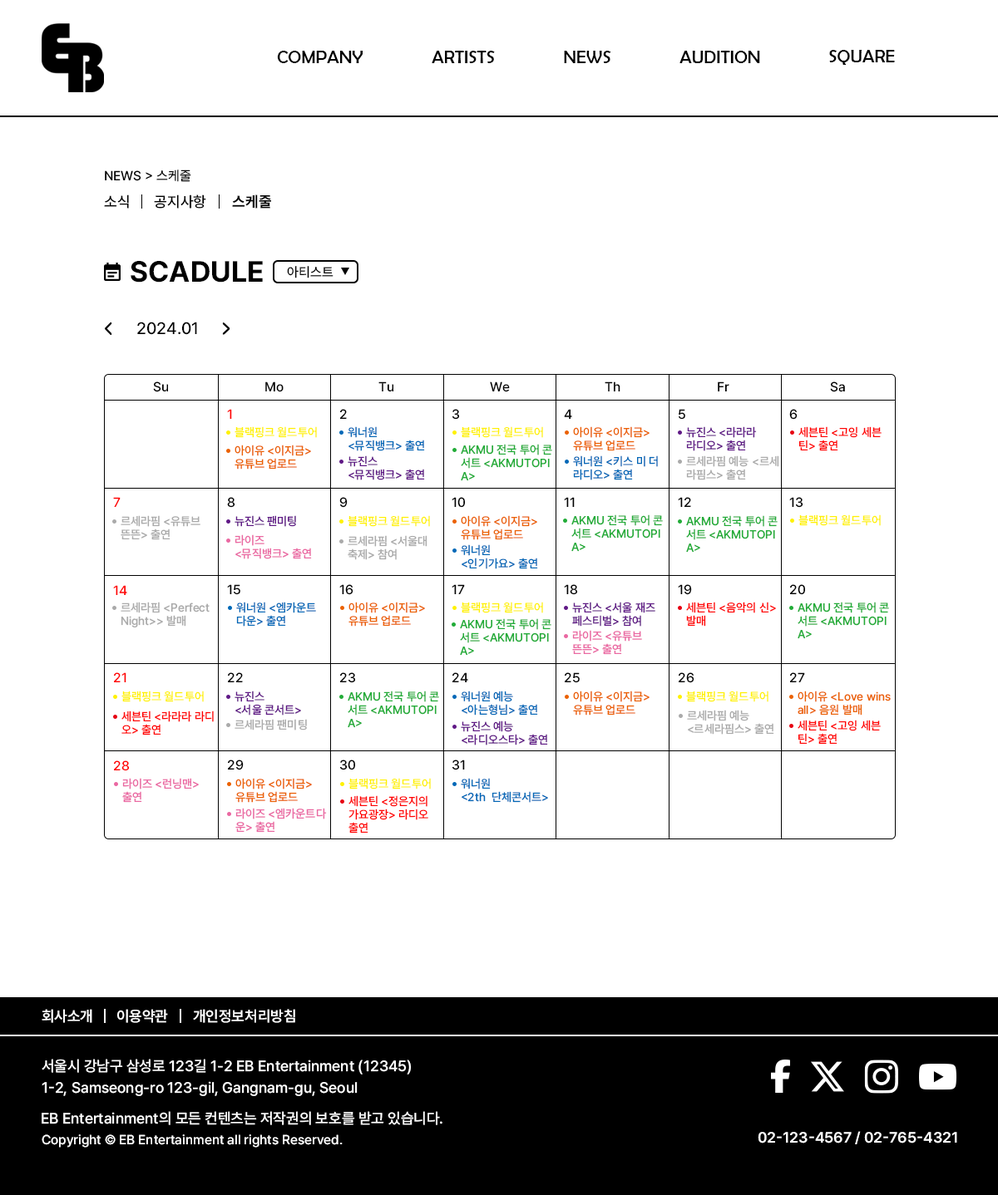
<style>
.page{position:relative;width:998px;height:1195px;background:#ffffff}
.page>*{position:absolute;margin:0}
.t1{font:18.3px "BerlinSansFB-Reg";color:#000000}
.t2{font:13.3px "Pretendard-Medium";color:#000000}
.t3{font:15px "Pretendard-Medium";color:#000000}
.t4{font:15px "Pretendard-Bold";color:#000000}
.t5{font:29.1px "Pretendard-Bold";color:#000000}
.t6{font:16.6px "Pretendard-Medium";color:#000000}
.t7{font:13.3px "Pretendard-Medium";color:#ff0000}
.t8{font:11.6px "Pretendard-Medium";color:#fff100}
.t9{font:11.6px/13.3px "Pretendard-Medium";color:#0068b7}
.t10{font:11.6px/13.3px "Pretendard-Medium";color:#eb6100}
.t11{font:11.6px/13.3px "Pretendard-Medium";color:#601986}
.t12{font:11.6px/13.3px "Pretendard-Medium";color:#ff0000}
.t13{font:11.6px/13.3px "Pretendard-Medium";color:#22ac38}
.t14{font:11.6px/13.3px "Pretendard-Medium";color:#aaaaaa}
.t15{font:11.6px "Pretendard-Medium";color:#601986}
.t16{font:11.6px/13.3px "Pretendard-Medium";color:#ea68a2}
.t17{font:11.6px "Pretendard-Medium";color:#aaaaaa}
.t18{font:15px "Pretendard-SemiBold";color:#ffffff}
.t19{font:15px/21.6px "Pretendard-Medium";color:#ffffff}
.t20{font:15px "Pretendard-Medium";color:#ffffff}
.t21{font:13.3px "Pretendard-Medium";color:#ffffff}
</style>
<div class="page">
<p class="t1" style="left:277px;top:51px;width:85px;height:12px">COMPANY</p>
<p class="t1" style="left:431px;top:51px;width:64px;height:12px">ARTISTS</p>
<p class="t1" style="left:564px;top:51px;width:47px;height:12px">NEWS</p>
<p class="t1" style="left:679px;top:51px;width:81px;height:12px">AUDITION</p>
<p class="t1" style="left:829px;top:50px;width:65px;height:15px">SQUARE</p>
<p class="t2" style="left:105px;top:170px;width:86px;height:12px">NEWS &gt; 스케줄</p>
<p class="t3" style="left:104px;top:195px;width:25px;height:14px">소식</p>
<p class="t3" style="left:154px;top:195px;width:52px;height:14px">공지사항</p>
<p class="t4" style="left:232px;top:195px;width:39px;height:14px">스케줄</p>
<p class="t5" style="left:131px;top:261px;width:132px;height:22px">SCADULE</p>
<p class="t2" style="left:287px;top:266px;width:46px;height:12px">아티스트</p>
<p class="t6" style="left:137px;top:322px;width:60px;height:13px">2024.01</p>
<p class="t2" style="left:153px;top:382px;width:15px;height:10px">Su</p>
<p class="t2" style="left:265px;top:382px;width:18px;height:10px">Mo</p>
<p class="t2" style="left:378px;top:382px;width:15px;height:10px">Tu</p>
<p class="t2" style="left:490px;top:382px;width:20px;height:10px">We</p>
<p class="t2" style="left:604px;top:382px;width:16px;height:10px">Th</p>
<p class="t2" style="left:717px;top:382px;width:12px;height:10px">Fr</p>
<p class="t2" style="left:830px;top:382px;width:15px;height:10px">Sa</p>
<p class="t7" style="left:227px;top:409px;width:5px;height:10px">1</p>
<p class="t2" style="left:340px;top:409px;width:7px;height:10px">2</p>
<p class="t2" style="left:452px;top:409px;width:7px;height:11px">3</p>
<p class="t2" style="left:564px;top:409px;width:8px;height:10px">4</p>
<p class="t2" style="left:678px;top:409px;width:7px;height:11px">5</p>
<p class="t2" style="left:789px;top:409px;width:8px;height:11px">6</p>
<p class="t8" style="left:234px;top:426px;width:83px;height:12px">블랙핑크 월드투어</p>
<p class="t9" style="left:347px;top:426px;width:78px;height:25px">워너원<br>&lt;뮤직뱅크&gt; 출연</p>
<p class="t8" style="left:461px;top:426px;width:82px;height:12px">블랙핑크 월드투어</p>
<p class="t10" style="left:573px;top:426px;width:76px;height:25px">아이유 &lt;이지금&gt;<br>유튜브 업로드</p>
<p class="t11" style="left:686px;top:426px;width:70px;height:25px">뉴진스 &lt;라라라 <br>라디오&gt; 출연</p>
<p class="t12" style="left:798px;top:426px;width:83px;height:25px">세븐틴 &lt;고잉 세븐<br>틴&gt; 출연</p>
<p class="t10" style="left:234px;top:445px;width:77px;height:25px">아이유 &lt;이지금&gt;<br>유튜브 업로드</p>
<p class="t13" style="left:461px;top:444px;width:91px;height:37px">AKMU 전국 투어 콘<br>서트 &lt;AKMUTOPI<br>A&gt;</p>
<p class="t11" style="left:347px;top:456px;width:78px;height:24px">뉴진스<br>&lt;뮤직뱅크&gt; 출연</p>
<p class="t9" style="left:573px;top:456px;width:85px;height:24px">워너원 &lt;키스 미 더 <br>라디오&gt; 출연</p>
<p class="t14" style="left:686px;top:456px;width:93px;height:24px">르세라핌 예능 &lt;르세<br>라핌스&gt; 출연</p>
<p class="t7" style="left:113px;top:497px;width:8px;height:10px">7</p>
<p class="t2" style="left:227px;top:497px;width:7px;height:11px">8</p>
<p class="t2" style="left:339px;top:497px;width:8px;height:11px">9</p>
<p class="t2" style="left:451px;top:497px;width:14px;height:11px">10</p>
<p class="t2" style="left:564px;top:497px;width:10px;height:10px">11</p>
<p class="t2" style="left:677px;top:497px;width:14px;height:10px">12</p>
<p class="t2" style="left:789px;top:497px;width:13px;height:11px">13</p>
<p class="t14" style="left:121px;top:515px;width:79px;height:25px">르세라핌 &lt;유튜브 <br>뜬뜬&gt; 출연</p>
<p class="t15" style="left:234px;top:515px;width:62px;height:12px">뉴진스 팬미팅</p>
<p class="t8" style="left:347px;top:515px;width:83px;height:12px">블랙핑크 월드투어</p>
<p class="t10" style="left:461px;top:515px;width:76px;height:25px">아이유 &lt;이지금&gt;<br>유튜브 업로드</p>
<p class="t13" style="left:571px;top:515px;width:92px;height:37px">AKMU 전국 투어 콘<br>서트 &lt;AKMUTOPI<br>A&gt;</p>
<p class="t13" style="left:686px;top:515px;width:91px;height:38px">AKMU 전국 투어 콘<br>서트 &lt;AKMUTOPI<br>A&gt;</p>
<p class="t8" style="left:798px;top:515px;width:82px;height:11px">블랙핑크 월드투어</p>
<p class="t16" style="left:234px;top:535px;width:78px;height:24px">라이즈<br>&lt;뮤직뱅크&gt; 출연</p>
<p class="t14" style="left:347px;top:535px;width:80px;height:25px">르세라핌 &lt;서울대 <br>축제&gt; 참여</p>
<p class="t9" style="left:461px;top:544px;width:77px;height:25px">워너원 <br>&lt;인기가요&gt; 출연</p>
<p class="t7" style="left:113px;top:585px;width:14px;height:10px">14</p>
<p class="t2" style="left:227px;top:584px;width:13px;height:11px">15</p>
<p class="t2" style="left:339px;top:584px;width:14px;height:11px">16</p>
<p class="t2" style="left:451px;top:584px;width:14px;height:10px">17</p>
<p class="t2" style="left:564px;top:584px;width:13px;height:11px">18</p>
<p class="t2" style="left:677px;top:584px;width:15px;height:11px">19</p>
<p class="t2" style="left:790px;top:584px;width:15px;height:11px">20</p>
<p class="t14" style="left:121px;top:602px;width:88px;height:26px">르세라핌 &lt;Perfect <br>Night&gt;&gt; 발매</p>
<p class="t9" style="left:236px;top:602px;width:80px;height:25px">워너원 &lt;엠카운트<br>다운&gt; 출연</p>
<p class="t10" style="left:348px;top:602px;width:77px;height:25px">아이유 &lt;이지금&gt;<br>유튜브 업로드</p>
<p class="t8" style="left:461px;top:602px;width:82px;height:11px">블랙핑크 월드투어</p>
<p class="t11" style="left:572px;top:602px;width:83px;height:25px">뉴진스 &lt;서울 재즈 <br>페스티벌&gt; 참여</p>
<p class="t12" style="left:686px;top:602px;width:90px;height:25px">세븐틴 &lt;음악의 신&gt;<br>발매</p>
<p class="t13" style="left:797px;top:602px;width:92px;height:37px">AKMU 전국 투어 콘<br>서트 &lt;AKMUTOPI<br>A&gt;</p>
<p class="t13" style="left:460px;top:618px;width:91px;height:38px">AKMU 전국 투어 콘<br>서트 &lt;AKMUTOPI<br>A&gt;</p>
<p class="t16" style="left:572px;top:630px;width:70px;height:25px">라이즈 &lt;유튜브<br>뜬뜬&gt; 출연</p>
<p class="t7" style="left:114px;top:673px;width:12px;height:9px">21</p>
<p class="t2" style="left:228px;top:673px;width:15px;height:9px">22</p>
<p class="t2" style="left:340px;top:673px;width:15px;height:10px">23</p>
<p class="t2" style="left:452px;top:673px;width:16px;height:9px">24</p>
<p class="t2" style="left:564px;top:673px;width:15px;height:10px">25</p>
<p class="t2" style="left:678px;top:673px;width:16px;height:10px">26</p>
<p class="t2" style="left:790px;top:673px;width:15px;height:9px">27</p>
<p class="t8" style="left:121px;top:691px;width:83px;height:11px">블랙핑크 월드투어</p>
<p class="t11" style="left:234px;top:691px;width:67px;height:25px">뉴진스 <br>&lt;서울 콘서트&gt;</p>
<p class="t13" style="left:347px;top:691px;width:92px;height:37px">AKMU 전국 투어 콘<br>서트 &lt;AKMUTOPI<br>A&gt;</p>
<p class="t9" style="left:461px;top:691px;width:77px;height:25px">워너원 예능<br>&lt;아는형님&gt; 출연</p>
<p class="t10" style="left:573px;top:691px;width:76px;height:25px">아이유 &lt;이지금&gt;<br>유튜브 업로드</p>
<p class="t8" style="left:686px;top:691px;width:82px;height:11px">블랙핑크 월드투어</p>
<p class="t10" style="left:797px;top:691px;width:93px;height:25px">아이유 &lt;Love wins <br>all&gt; 음원 발매</p>
<p class="t12" style="left:121px;top:711px;width:93px;height:25px">세븐틴 &lt;라라라 라디<br>오&gt; 출연</p>
<p class="t14" style="left:687px;top:710px;width:87px;height:25px">르세라핌 예능 <br>&lt;르세라핌스&gt; 출연</p>
<p class="t17" style="left:234px;top:719px;width:73px;height:12px">르세라핌 팬미팅</p>
<p class="t11" style="left:461px;top:721px;width:87px;height:25px">뉴진스 예능 <br>&lt;라디오스타&gt; 출연</p>
<p class="t12" style="left:797px;top:720px;width:83px;height:25px">세븐틴 &lt;고잉 세븐<br>틴&gt; 출연</p>
<p class="t7" style="left:114px;top:761px;width:15px;height:10px">28</p>
<p class="t2" style="left:228px;top:760px;width:16px;height:11px">29</p>
<p class="t2" style="left:340px;top:760px;width:15px;height:11px">30</p>
<p class="t2" style="left:452px;top:760px;width:13px;height:11px">31</p>
<p class="t16" style="left:122px;top:778px;width:77px;height:25px">라이즈 &lt;런닝맨&gt;<br>출연</p>
<p class="t10" style="left:235px;top:778px;width:77px;height:25px">아이유 &lt;이지금&gt;<br>유튜브 업로드</p>
<p class="t8" style="left:348px;top:778px;width:83px;height:12px">블랙핑크 월드투어</p>
<p class="t9" style="left:461px;top:778px;width:87px;height:25px">워너원<br>&lt;2th  단체콘서트&gt;</p>
<p class="t12" style="left:348px;top:796px;width:80px;height:38px">세븐틴 &lt;정은지의 <br>가요광장&gt; 라디오 <br>출연</p>
<p class="t16" style="left:235px;top:808px;width:92px;height:25px">라이즈 &lt;엠카운트다<br>운&gt; 출연</p>
<p class="t18" style="left:42px;top:1009px;width:50px;height:14px">회사소개</p>
<p class="t18" style="left:117px;top:1009px;width:51px;height:14px">이용약관</p>
<p class="t18" style="left:193px;top:1009px;width:102px;height:14px">개인정보처리방침</p>
<p class="t19" style="left:42px;top:1059px;width:369px;height:37px">서울시 강남구 삼성로 123길 1-2 EB Entertainment (12345)<br>1-2, Samseong-ro 123-gil, Gangnam-gu, Seoul</p>
<p class="t20" style="left:42px;top:1111px;width:400px;height:15px">EB Entertainment의 모든 컨텐츠는 저작권의 보호를 받고 있습니다.</p>
<p class="t18" style="left:757px;top:1131px;width:200px;height:14px">02-123-4567 / 02-765-4321</p>
<p class="t21" style="left:42px;top:1135px;width:300px;height:13px">Copyright © EB Entertainment all rights Reserved.</p>
</div>
